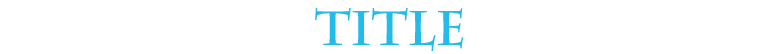
<style>
.page{position:relative;width:780px;height:54px;background:#ffffff}
.page>*{position:absolute;margin:0}
.t1{font:48px "CharlemagneStd-Bold";color:#22bbea}
</style>
<div class="page">
<p class="t1" style="left:315px;top:7px;width:149px;height:44px">title</p>
</div>
